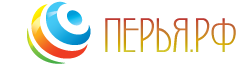
<style>
.page{position:relative;width:250px;height:70px;background:#ffffff}
.page>*{position:absolute;margin:0}
.t1{font:41.7px "SecessionLight"}
</style>
<div class="page">
<p class="t1" style="left:105px;top:18px;width:131px;height:34px">ПЕРЬЯ.РФ</p>
</div>
